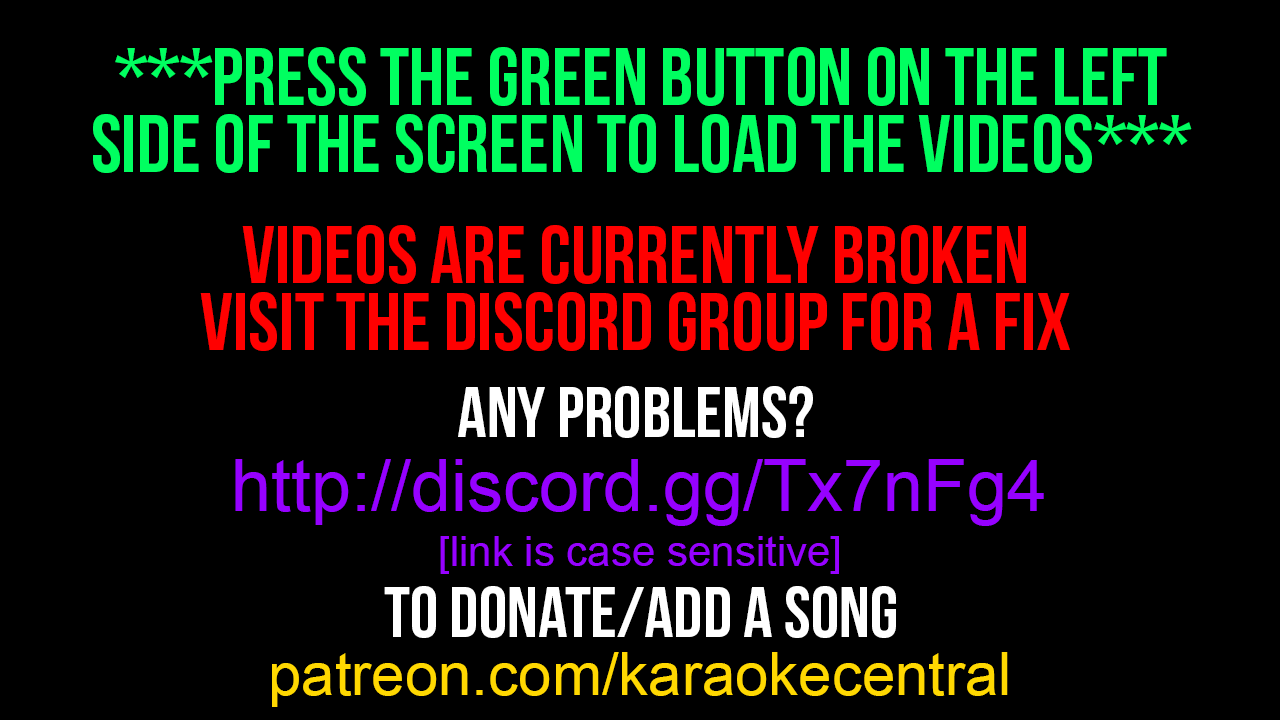
<style>
.page{position:relative;width:1280px;height:720px;background:#000000}
.page>*{position:absolute;margin:0}
.t1{font:82px/67px "BebasNeue";color:#00ff60}
.t2{font:82px/67px "BebasNeue";color:#ff0000}
.t3{font:72px "BebasNeue";color:#ffffff}
.t4{font:72px "ArialMT";color:#9601ff}
.t5{font:42px "ArialMT";color:#9601ff}
.t6{font:60px "ArialMT";color:#ffd801}
</style>
<div class="page">
<p class="t1" style="left:93px;top:47px;width:1099px;height:126px;text-align:center">***PRESS THE GREEN BUTTON ON THE LEFT<br>SIDE OF THE SCREEN TO LOAD THE VIDEOS***</p>
<p class="t2" style="left:200px;top:225px;width:870px;height:126px;text-align:center">VIDEOS ARE CURRENTLY BROKEN<br>VISIT THE DISCORD GROUP FOR A FIX</p>
<p class="t3" style="left:458px;top:386px;width:355px;height:52px">any problems?</p>
<p class="t4" style="left:235px;top:459px;width:809px;height:67px">http://discord.gg/Tx7nFg4</p>
<p class="t5" style="left:440px;top:536px;width:399px;height:38px">[link is case sensitive]</p>
<p class="t3" style="left:384px;top:586px;width:512px;height:52px">To donate/add a song</p>
<p class="t6" style="left:272px;top:652px;width:736px;height:55px">patreon.com/karaokecentral</p>
</div>
